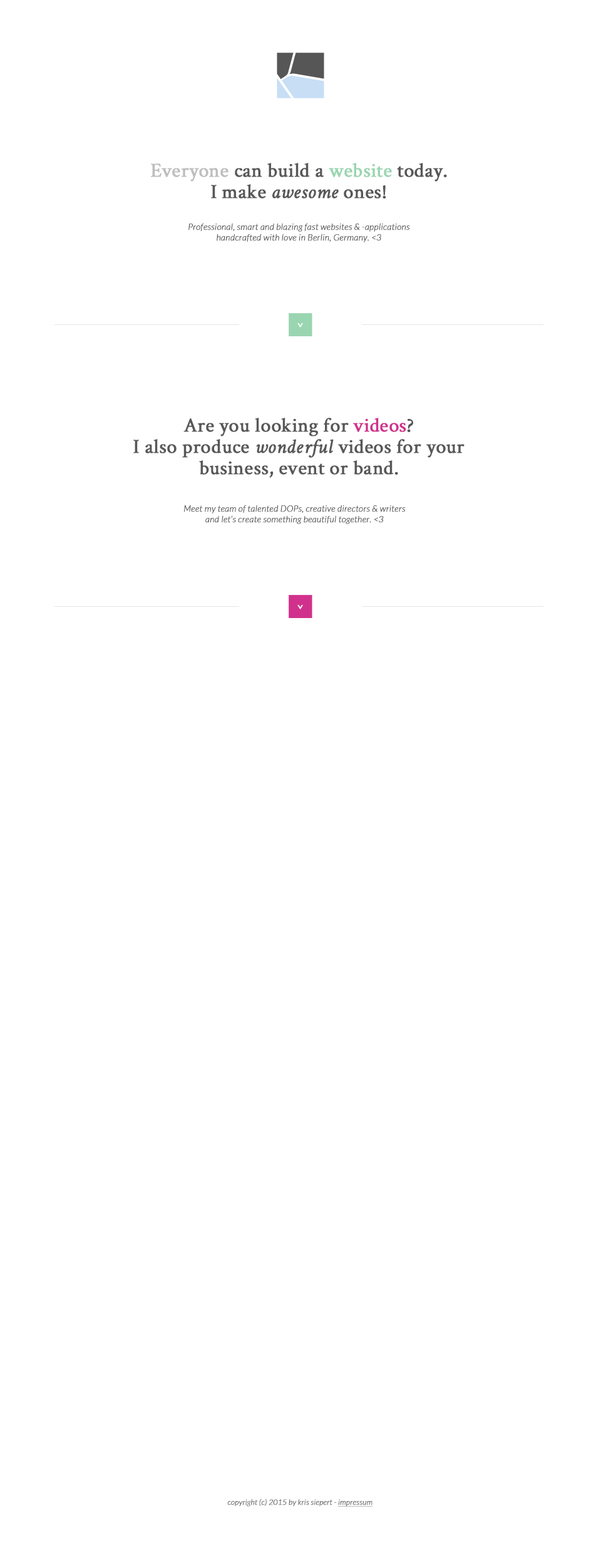
<style>
.page{position:relative;width:601px;height:1568px;background:#ffffff}
.page>*{position:absolute;margin:0}
.t1{font:20px/21.3px "CrimsonText-Roman";color:#575757;font-weight:bold}
.t2{font:20px/21.3px "CrimsonText-Roman";color:#bebebe;font-weight:bold}
.t3{font:20px/21.3px "CrimsonText-Roman";color:#9ad5b1;font-weight:bold}
.t4{font:20px/21.3px "CrimsonText-Italic";color:#575757;font-weight:bold}
.t5{font:8.8px "Lato-LightItalic";color:#575757;font-weight:bold}
.t6{font:11.6px "Lato-Regular";color:#ffffff;font-weight:bold;scale:0.87 1}
.t7{font:20px/21.3px "CrimsonText-Roman";color:#d1318c;font-weight:bold}
.t8{font:7.5px "Lato-LightItalic";color:#666666;font-weight:bold}
.t9{font:7.5px "Lato-LightItalic";color:#666666;font-weight:bold;text-decoration:underline}
</style>
<div class="page">
<p class="t1" style="left:151px;top:163px;width:296px;height:36px;text-align:center"><span class="t2">Everyone </span>can build a <span class="t3">website </span>today.<br>I make <span class="t4">awesome </span>ones!</p>
<p class="t5" style="left:188px;top:223px;width:222px;height:19px;text-align:center">Professional, smart and blazing fast websites &amp; -applications<br>handcrafted with love in Berlin, Germany. &lt;3</p>
<p class="t6" style="left:297px;top:323px;width:6px;height:5px;rotate:90deg">&gt;</p>
<p class="t1" style="left:133px;top:418px;width:332px;height:60px;text-align:center">Are you looking for <span class="t7">videos</span>?<br>I also produce <span class="t4">wonderful </span>videos for your<br>business, event or band.</p>
<p class="t5" style="left:184px;top:505px;width:222px;height:19px;text-align:center">Meet my team of talented DOPs, creative directors &amp; writers<br>and let‘s create something beautiful together. &lt;3</p>
<p class="t6" style="left:297px;top:605px;width:6px;height:4px;rotate:90deg">&gt;</p>
<p class="t8" style="left:227px;top:1498px;width:146px;height:9px">copyright (c) 2015 by kris siepert - <span class="t9">impressum</span></p>
</div>
